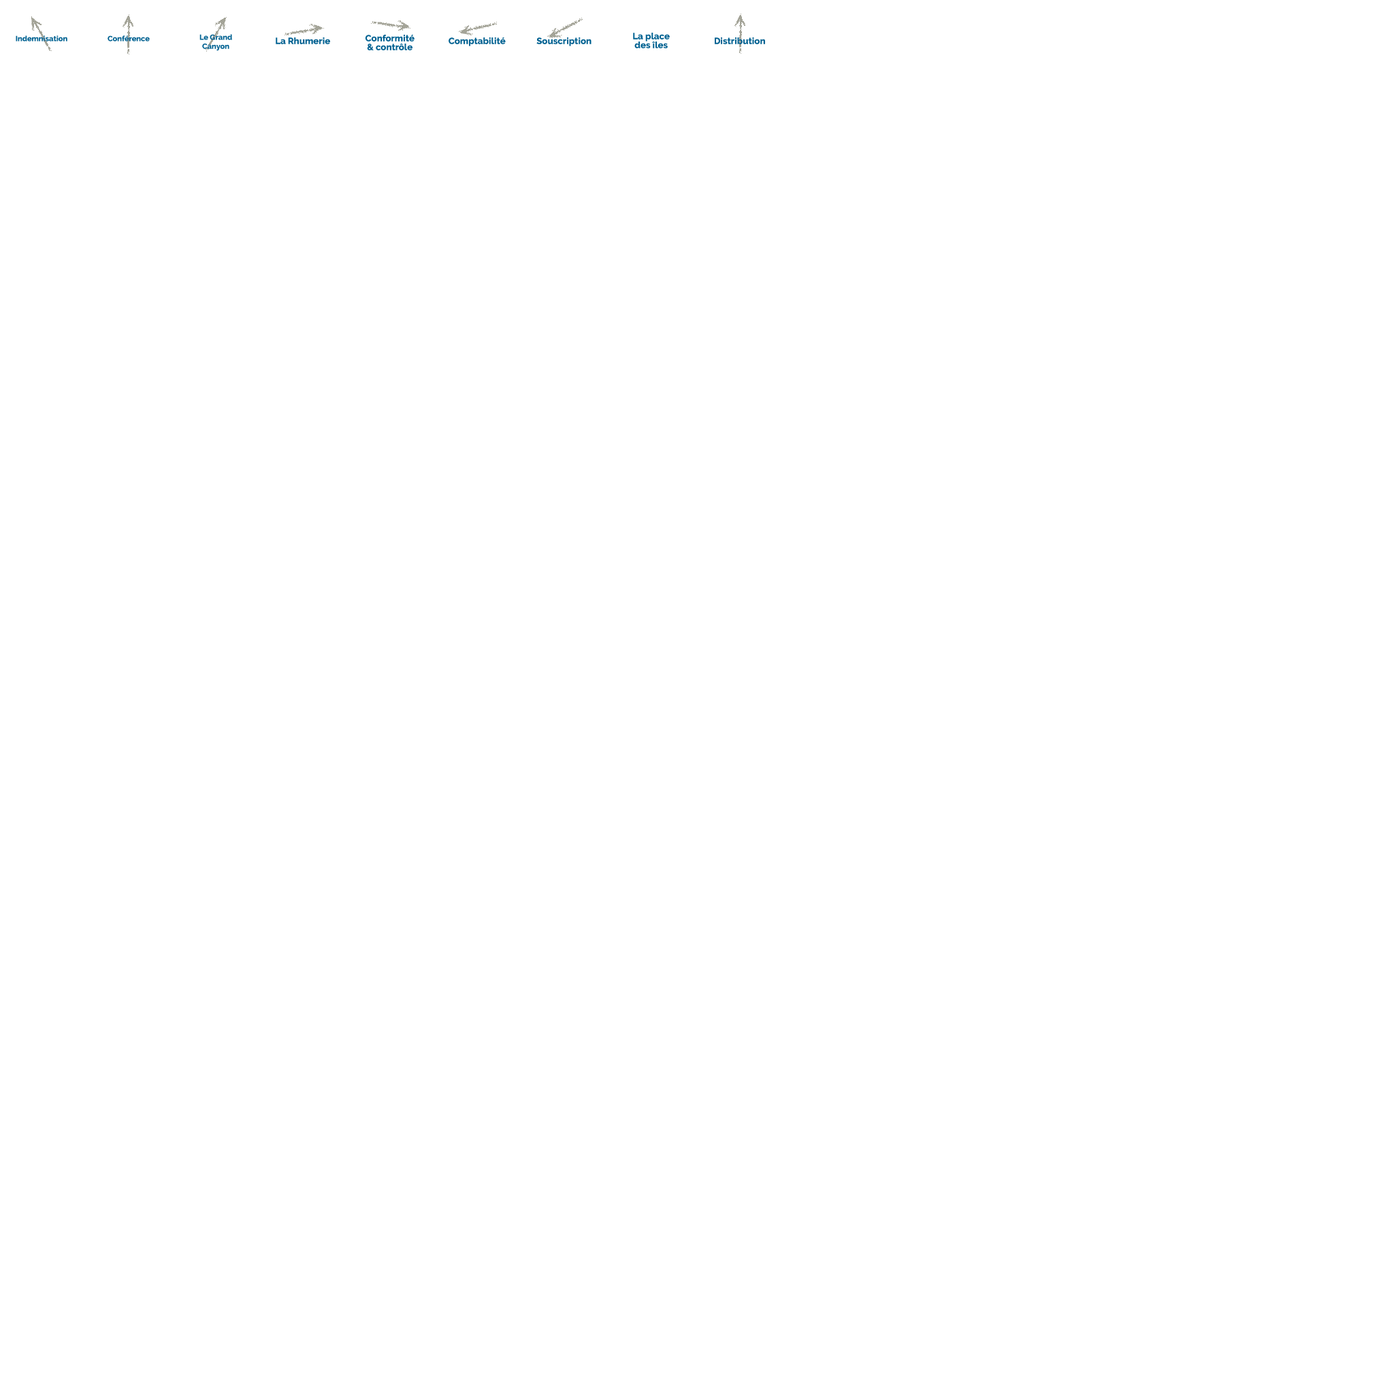
<style>
.page{position:relative;width:1394px;height:1394px;background:#ffffff}
.page>*{position:absolute;margin:0}
.t1{font:7.5px "Raleway-ExtraBold";color:#016292}
.t2{font:9px "Raleway-ExtraBold";color:#016292}
.t3{font:9px/8.8px "Raleway-ExtraBold";color:#016292}
</style>
<div class="page">
<p class="t1" style="left:16px;top:35px;width:51px;height:7px">Indemnisation</p>
<p class="t1" style="left:108px;top:35px;width:42px;height:7px">Conférence</p>
<p class="t1" style="left:199px;top:34px;width:33px;height:17px;text-align:center">Le Grand <br>Canyon</p>
<p class="t2" style="left:276px;top:37px;width:54px;height:7px">La Rhumerie</p>
<p class="t3" style="left:365px;top:35px;width:49px;height:15px;text-align:center">Conformité    <br>&amp; contrôle</p>
<p class="t2" style="left:449px;top:37px;width:57px;height:9px">Comptabilité</p>
<p class="t2" style="left:536px;top:37px;width:55px;height:9px">Souscription</p>
<p class="t3" style="left:633px;top:33px;width:37px;height:15px;text-align:center">La place <br>des îles</p>
<p class="t2" style="left:715px;top:37px;width:50px;height:7px">Distribution</p>
</div>
